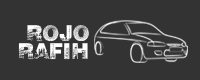
<style>
.page{position:relative;width:200px;height:80px;background:#333333}
.page>*{position:absolute;margin:0}
.t1{font:22.4px "cityscapefont-cityscapefont";color:#ffffff}
</style>
<div class="page">
<p class="t1" style="left:27px;top:25px;width:62px;height:17px">ROJO</p>
<p class="t1" style="left:18px;top:43px;width:70px;height:17px">RAFIH</p>
</div>
